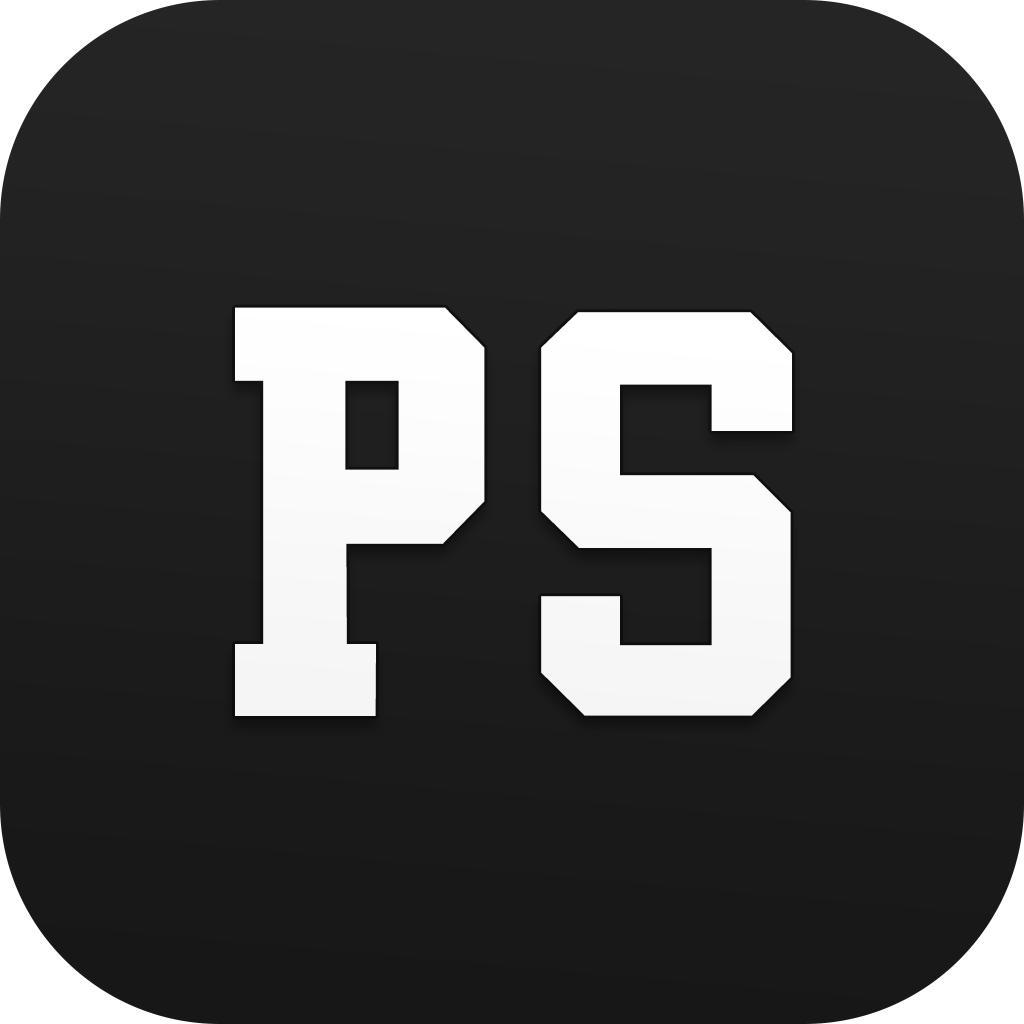
<style>
.page{position:relative;width:1024px;height:1024px}
.page>*{position:absolute;margin:0}
.t1{font:505px "Athletic";letter-spacing:0.075em;color:#ffffff}
.t2{font:500px "Athletic";letter-spacing:0.075em;color:#ffffff}
</style>
<div class="page">
<p class="t1" style="left:235px;top:307px;width:557px;height:409px">P<span class="t2">S</span></p>
</div>
